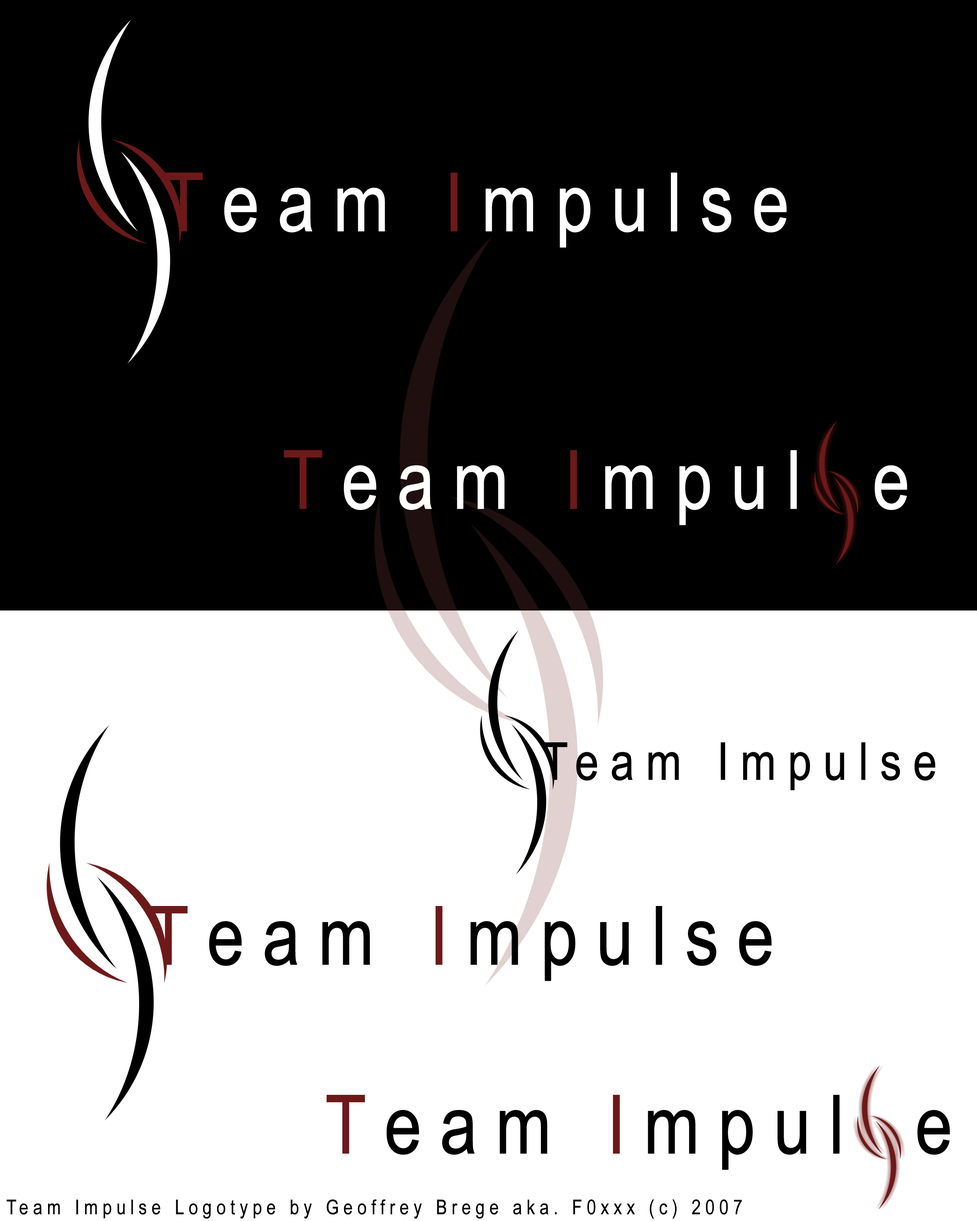
<style>
.page{position:relative;width:977px;height:1221px;background:#000000}
.page>*{position:absolute;margin:0}
.t1{font:81.4px "ArialNarrow";letter-spacing:0.2em;color:#ffffff;font-weight:bold}
.t2{font:81.4px "ArialNarrow";letter-spacing:0.2em;color:#6d1919;font-weight:bold}
.t3{font:81.4px "ArialNarrow";letter-spacing:0.2em;color:#000000;font-weight:bold}
</style>
<div class="page">
<p class="t1" style="left:164px;top:173px;width:623px;height:75px"><span class="t2">T</span>eam <span class="t2">I</span>mpulse</p>
<p class="t1" style="left:284px;top:450px;width:513px;height:75px"><span class="t2">T</span>eam <span class="t2">I</span>mpul</p>
<p class="t1" style="left:874px;top:465px;width:33px;height:45px">e</p>
<p class="t3" style="left:149px;top:906px;width:623px;height:75px"><span class="t2">T</span>eam <span class="t2">I</span>mpulse</p>
<p class="t3" style="left:326px;top:1095px;width:514px;height:75px"><span class="t2">T</span>eam <span class="t2">I</span>mpul</p>
<p class="t3" style="left:917px;top:1110px;width:33px;height:45px">e</p>
</div>
